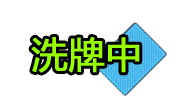
<style>
.page{position:relative;width:182px;height:104px;background:#ffffff}
.page>*{position:absolute;margin:0}
.t1{font:36px "MicrosoftYaHei";color:#96ff00;font-weight:bold}
</style>
<div class="page">
<p class="t1" style="left:31px;top:37px;width:109px;height:36px">洗牌中</p>
</div>
